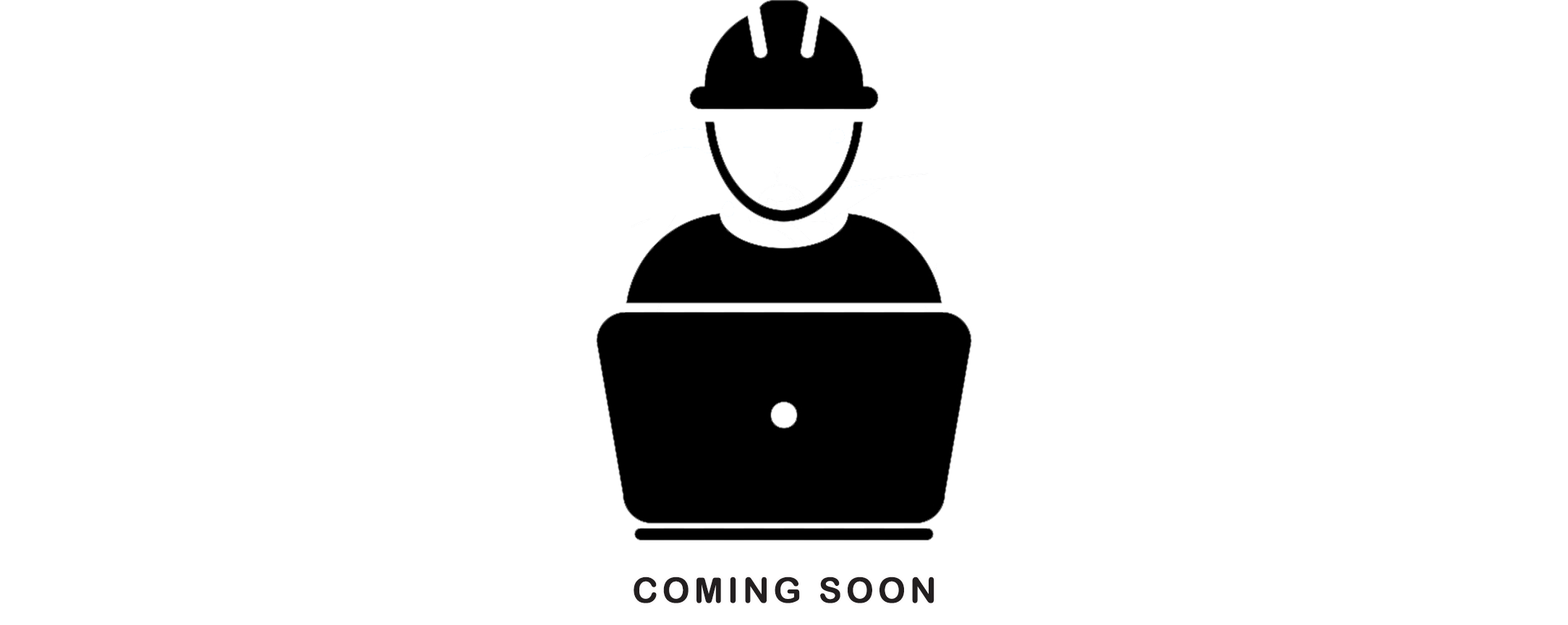
<style>
.page{position:relative;width:1568px;height:625px;background:#ffffff}
.page>*{position:absolute;margin:0}
.t1{font:34.7px "ArialRoundedMTBold";letter-spacing:0.1em;color:#231f20;font-variant:small-caps;font-weight:bold}
</style>
<div class="page">
<p class="t1" style="left:634px;top:576px;width:300px;height:27px">COMING SOON</p>
</div>
